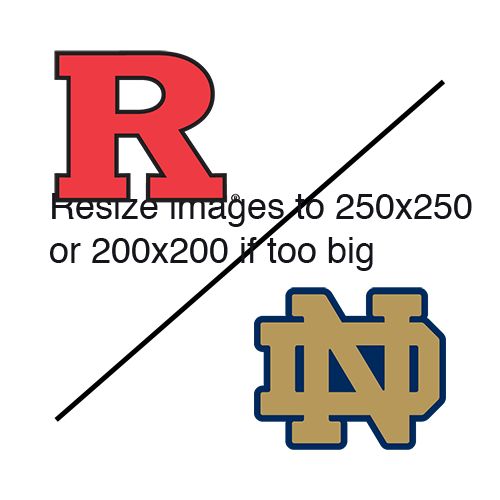
<style>
.page{position:relative;width:500px;height:500px;background:#ffffff}
.page>*{position:absolute;margin:0}
.t1{font:36px "Helvetica";color:#16141a}
</style>
<div class="page">
<p class="t1" style="left:50px;top:193px;width:422px;height:78px">Resize images to 250x250<br>or 200x200 if too big</p>
</div>
